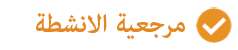
<style>
.page{position:relative;width:238px;height:50px;background:#ffffff}
.page>*{position:absolute;margin:0}
.t1{font:36px "AdobeArabic-Bold";color:#e48621}
</style>
<div class="page">
<p class="t1" style="left:36px;top:12px;width:149px;height:28px">مرجعية الانشطة</p>
</div>
